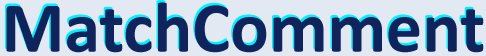
<style>
.page{position:relative;width:486px;height:56px;background:#e3e9f2}
.page>*{position:absolute;margin:0}
.t1{font:72px "Calibri-Bold";color:#0f245d}
</style>
<div class="page">
<p class="t1" style="left:5px;top:0px;width:477px;height:50px">MatchComment</p>
<p class="t1" style="left:6px;top:2px;width:478px;height:51px">MatchComment</p>
</div>
